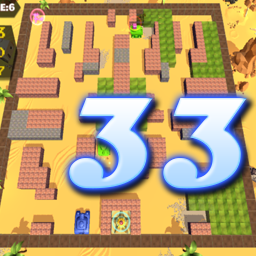
<style>
.page{position:relative;width:256px;height:256px}
.page>*{position:absolute;margin:0}
.t1{font:128.2px "Magneto-Bold";letter-spacing:0.02em}
</style>
<div class="page">
<p class="t1" style="left:69px;top:98px;width:178px;height:91px">33</p>
</div>
